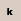
<style>
.page{position:relative;width:21px;height:21px;background:#d9cdc1}
.page>*{position:absolute;margin:0}
.t1{font:9px "Tahoma-Bold";color:#000000}
</style>
<div class="page">
<p class="t1" style="left:7px;top:8px;width:6px;height:7px">k</p>
</div>
